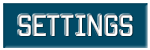
<style>
.page{position:relative;width:150px;height:50px;background:#014a66}
.page>*{position:absolute;margin:0}
.t1{font:24.3px "Manteka";color:#ffffff}
</style>
<div class="page">
<p class="t1" style="left:18px;top:14px;width:115px;height:22px">SETTINGS</p>
</div>
